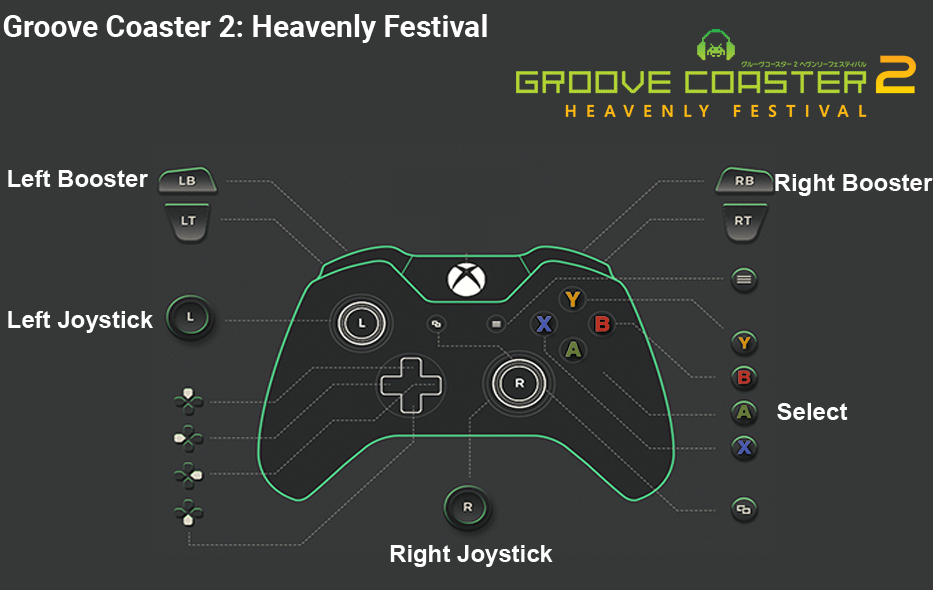
<style>
.page{position:relative;width:933px;height:590px;background:#363838}
.page>*{position:absolute;margin:0}
.t1{font:30px "Roboto-Bold";color:#ffffff}
.t2{font:24px "Arial-BoldMT";color:#fefefe}
</style>
<div class="page">
<p class="t1" style="left:3px;top:14px;width:484px;height:29px">Groove Coaster 2: Heavenly Festival</p>
<p class="t2" style="left:8px;top:170px;width:140px;height:17px">Left Booster</p>
<p class="t2" style="left:775px;top:174px;width:158px;height:22px">Right Booster</p>
<p class="t2" style="left:8px;top:311px;width:145px;height:22px">Left Joystick</p>
<p class="t2" style="left:777px;top:403px;width:71px;height:17px">Select</p>
<p class="t2" style="left:390px;top:545px;width:163px;height:22px">Right Joystick</p>
</div>
